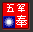
<style>
.page{position:relative;width:33px;height:32px;background:#f20000}
.page>*{position:absolute;margin:0}
.t1{font:10.4px "SimSun";color:#ffffff}
.t2{font:11.7px "SimSun";color:#ffffff}
</style>
<div class="page">
<p class="t1" style="left:7px;top:4px;width:18px;height:8px">五军</p>
<p class="t2" style="left:16px;top:15px;width:11px;height:12px">奉</p>
</div>
